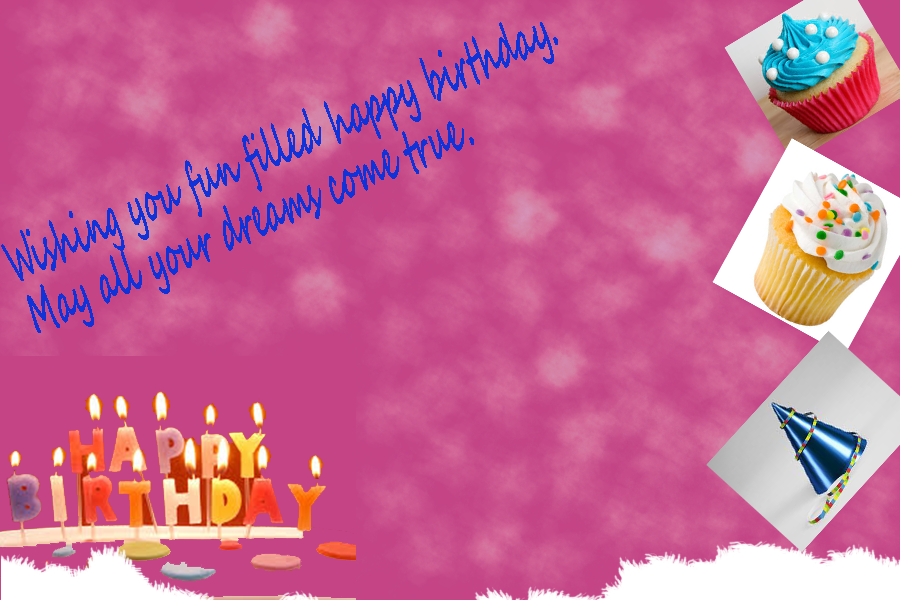
<style>
.page{position:relative;width:900px;height:600px}
.page>*{position:absolute;margin:0}
.t1{font:57.5px/19.2px "SegoeScript-Bold";color:#1132d7;scale:0.48 1}
</style>
<div class="page">
<p class="t1" style="left:1px;top:22px;width:557px;height:311px;rotate:-24deg">Wishing you fun filled happy birthday.<br><br><br>May all your dreams come true.</p>
<p class="t1" style="left:1px;top:22px;width:557px;height:311px;rotate:-24deg">Wishing you fun filled happy birthday.<br><br><br>May all your dreams come true.</p>
</div>
